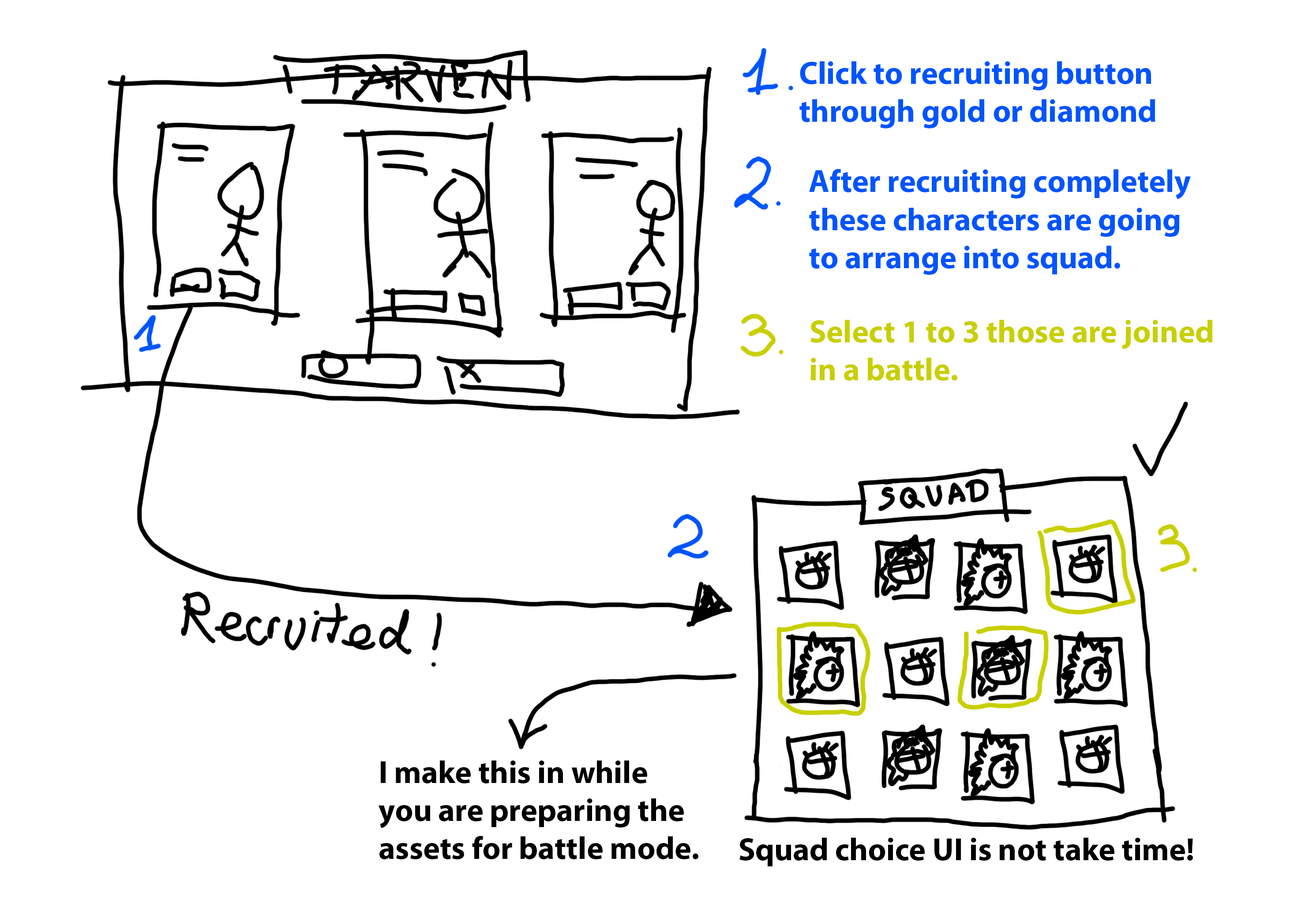
<style>
.page{position:relative;width:1305px;height:914px;background:#ffffff}
.page>*{position:absolute;margin:0}
.t1{font:31.8px "MyriadPro-Bold";color:#0054ff}
.t2{font:31.8px "MyriadPro-Bold";color:#c8cf00}
.t3{font:31.8px "MyriadPro-Bold";color:#000000}
</style>
<div class="page">
<p class="t1" style="left:799px;top:61px;width:356px;height:67px">Click to recruiting button<br>through gold or diamond</p>
<p class="t1" style="left:809px;top:169px;width:381px;height:106px">After recruiting completely<br>these characters are going<br>to arrange into squad.</p>
<p class="t2" style="left:810px;top:320px;width:403px;height:61px">Select 1 to 3 those are joined<br>in a battle.</p>
<p class="t3" style="left:378px;top:760px;width:320px;height:99px">I make this in while<br>you are preparing the <br>assets for battle mode.</p>
<p class="t3" style="left:739px;top:838px;width:454px;height:28px">Squad choice UI is not take time!</p>
</div>
